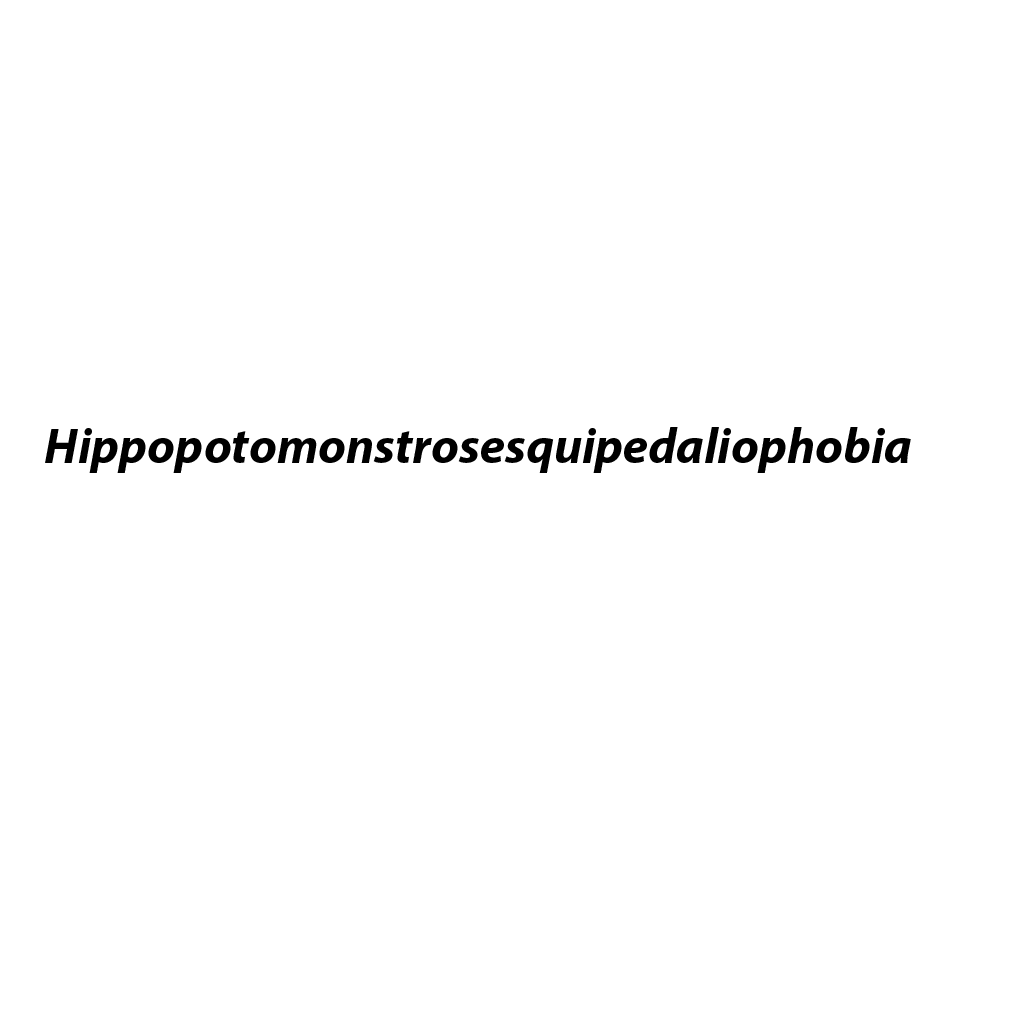
<style>
.page{position:relative;width:1024px;height:1024px;background:#ffffff}
.page>*{position:absolute;margin:0}
.t1{font:50px "MyriadPro-BoldIt";color:#000000}
</style>
<div class="page">
<p class="t1" style="left:45px;top:427px;width:866px;height:46px">Hippopotomonstrosesquipedaliophobia</p>
</div>
